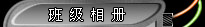
<style>
.page{position:relative;width:205px;height:27px}
.page>*{position:absolute;margin:0}
.t1{font:14px "SimSun";color:#ffffff}
</style>
<div class="page">
<p class="t1" style="left:49px;top:8px;width:76px;height:13px">班 级 相 册</p>
</div>
